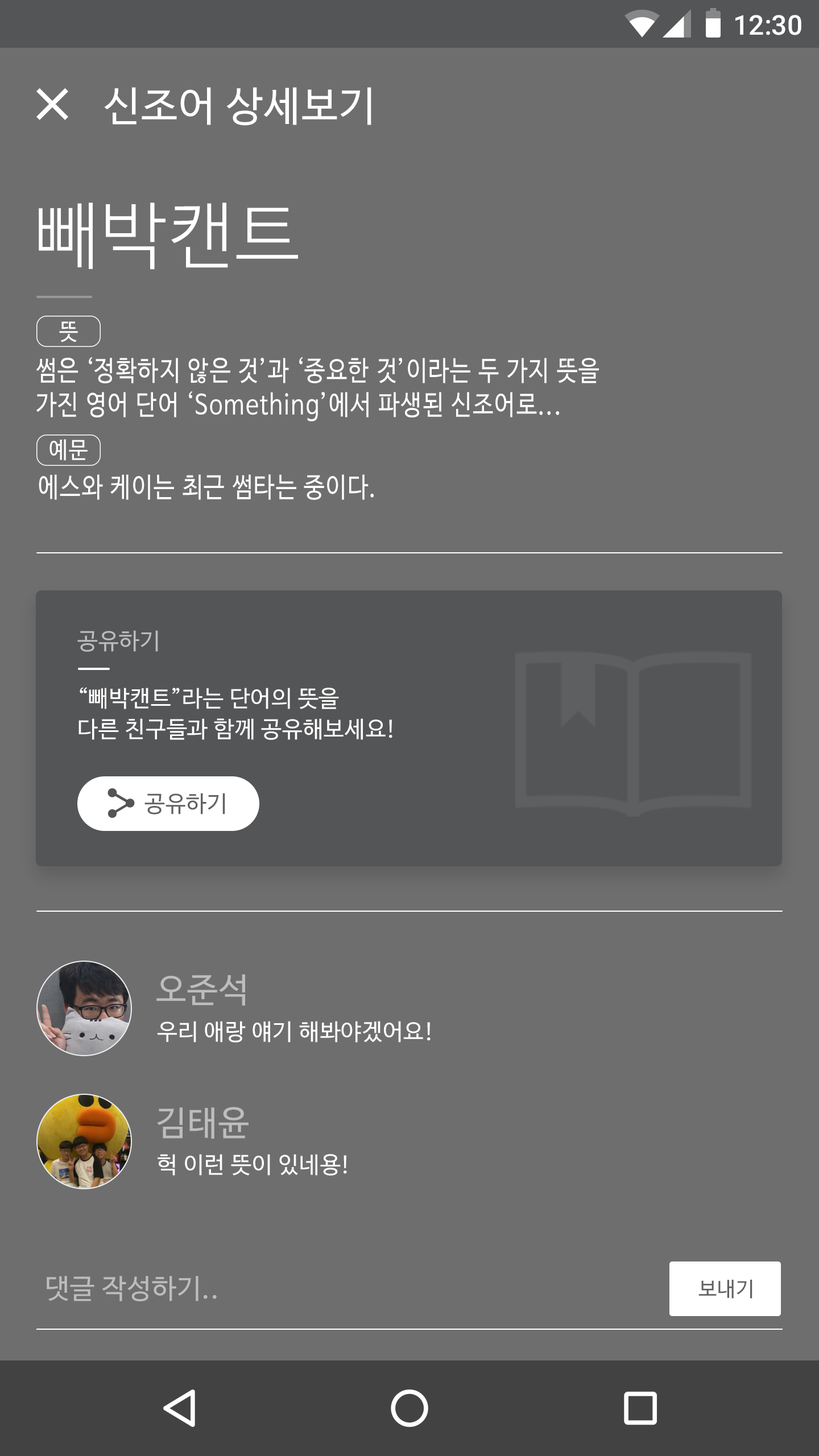
<style>
.page{position:relative;width:819px;height:1456px;background:#6f6e6e}
.page>*{position:absolute;margin:0}
.t1{font:27.3px "Roboto-Medium";color:#ffffff}
.t2{font:40.9px "NanumBarunGothic";letter-spacing:0.025em;color:#ffffff}
.t3{font:72.8px "NanumBarunGothicLight";letter-spacing:0.025em;color:#ffffff}
.t4{font:22.9px "NanumBarunGothic";letter-spacing:0.05em;color:#ffffff;scale:0.93 1}
.t5{font:27.3px/34.1px "NanumBarunGothic";letter-spacing:0.05em;color:#ffffff;scale:0.85 1}
.t6{font:27.3px "NanumBarunGothic";letter-spacing:0.05em;color:#fefefe;scale:0.85 1}
.t7{font:22.7px "NanumBarunGothic";letter-spacing:0.025em;color:#bdbdbd}
.t8{font:22.7px/30.7px "NanumBarunGothic";letter-spacing:0.025em;color:#ffffff}
.t9{font:22.7px "NanumBarunGothic";letter-spacing:0.025em;color:#616161}
.t10{font:34.1px "NanumBarunGothic";letter-spacing:0.025em;color:#bdbdbd}
.t11{font:22.7px "NanumBarunGothic";letter-spacing:0.025em;color:#ffffff}
.t12{font:27.3px "NanumBarunGothic";letter-spacing:0.025em;color:#bdbdbd}
.t13{font:20.5px "NanumBarunGothic";letter-spacing:0.025em;color:#616161}
</style>
<div class="page">
<p class="t1" style="left:735px;top:15px;width:66px;height:20px">12:30</p>
<p class="t2" style="left:104px;top:87px;width:267px;height:39px">신조어 상세보기</p>
<p class="t3" style="left:39px;top:202px;width:259px;height:68px">빼박캔트</p>
<p class="t4" style="left:59px;top:321px;width:19px;height:21px">뜻</p>
<p class="t5" style="left:36px;top:357px;width:563px;height:64px">썸은 ‘정확하지 않은 것’과 ‘중요한 것’이라는 두 가지 뜻을 <br>가진 영어 단어 ‘Something’에서 파생된 신조어로...</p>
<p class="t4" style="left:49px;top:439px;width:39px;height:22px">예문</p>
<p class="t6" style="left:39px;top:474px;width:335px;height:26px">에스와 케이는 최근 썸타는 중이다.</p>
<p class="t7" style="left:77px;top:630px;width:81px;height:22px">공유하기</p>
<p class="t8" style="left:78px;top:687px;width:314px;height:53px">“빼박캔트”라는 단어의 뜻을 <br>다른 친구들과 함께 공유해보세요!</p>
<p class="t9" style="left:144px;top:793px;width:81px;height:21px">공유하기</p>
<p class="t10" style="left:156px;top:974px;width:89px;height:32px">오준석</p>
<p class="t11" style="left:158px;top:1021px;width:273px;height:22px">우리 애랑 얘기 해봐야겠어요!</p>
<p class="t10" style="left:157px;top:1107px;width:92px;height:32px">김태윤</p>
<p class="t11" style="left:158px;top:1154px;width:189px;height:22px">헉 이런 뜻이 있네용!</p>
<p class="t12" style="left:47px;top:1276px;width:170px;height:25px">댓글 작성하기..</p>
<p class="t13" style="left:698px;top:1280px;width:54px;height:18px">보내기</p>
</div>
